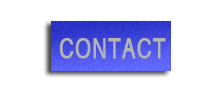
<style>
.page{position:relative;width:200px;height:100px;background:#ffffff}
.page>*{position:absolute;margin:0}
.t1{font:26px "Helvetica";letter-spacing:0.05em;color:#b4b4b4;font-weight:bold;scale:0.77 1}
</style>
<div class="page">
<p class="t1" style="left:59px;top:38px;width:107px;height:21px">CONTACT</p>
</div>
